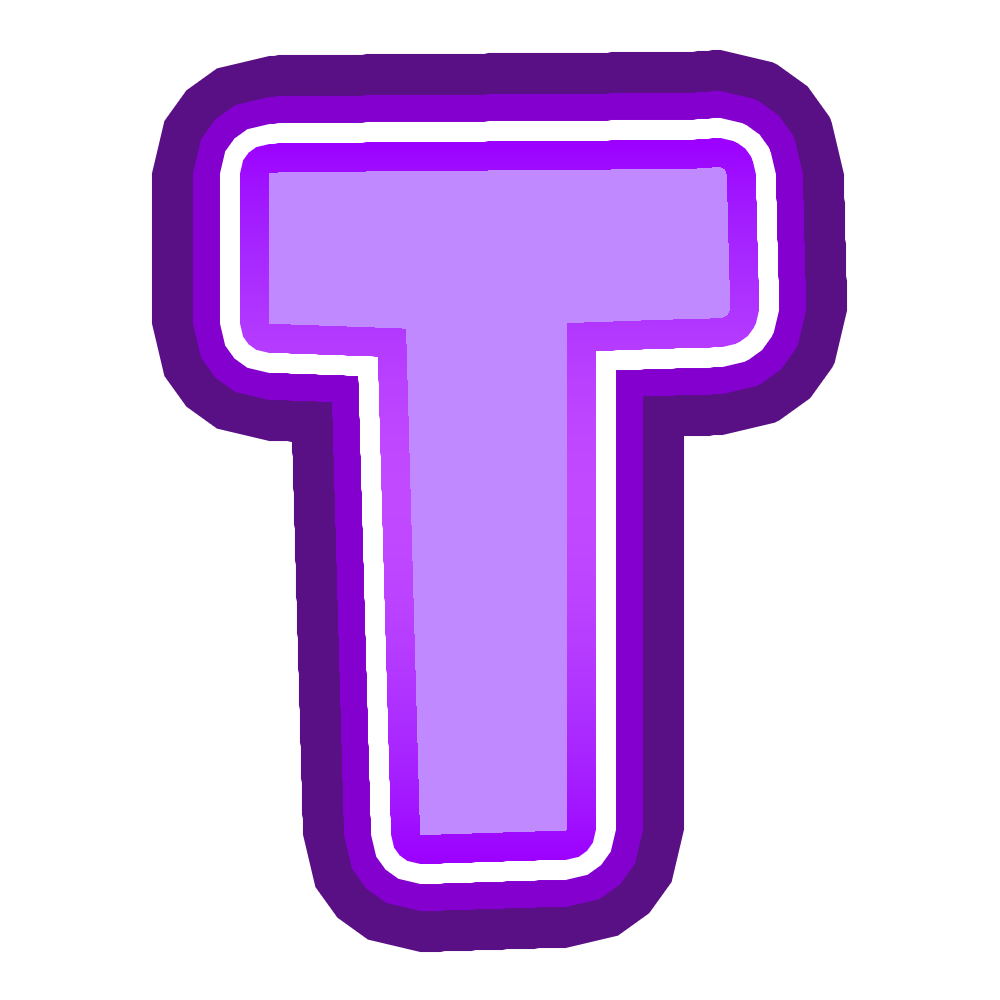
<style>
.page{position:relative;width:1000px;height:1000px;background:#ffffff}
.page>*{position:absolute;margin:0}
.t1{font:867.1px "JusticeStoryRegular";letter-spacing:-0.001em;color:#c089ff}
</style>
<div class="page">
<p class="t1" style="left:269px;top:167px;width:461px;height:668px">T</p>
</div>
